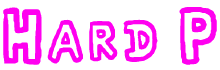
<style>
.page{position:relative;width:220px;height:70px;background:#ffffff}
.page>*{position:absolute;margin:0}
.t1{font:62px "FridayNightFunkinFont-Rg";color:#ff00f0}
</style>
<div class="page">
<p class="t1" style="left:3px;top:7px;width:214px;height:58px">Hard P</p>
</div>
